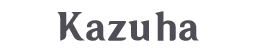
<style>
.page{position:relative;width:256px;height:56px;background:#ffffff}
.page>*{position:absolute;margin:0}
.t1{font:36px "HYWenHei-HEW";color:#4f4e57}
</style>
<div class="page">
<p class="t1" style="left:57px;top:11px;width:142px;height:30px">Kazuha</p>
</div>
